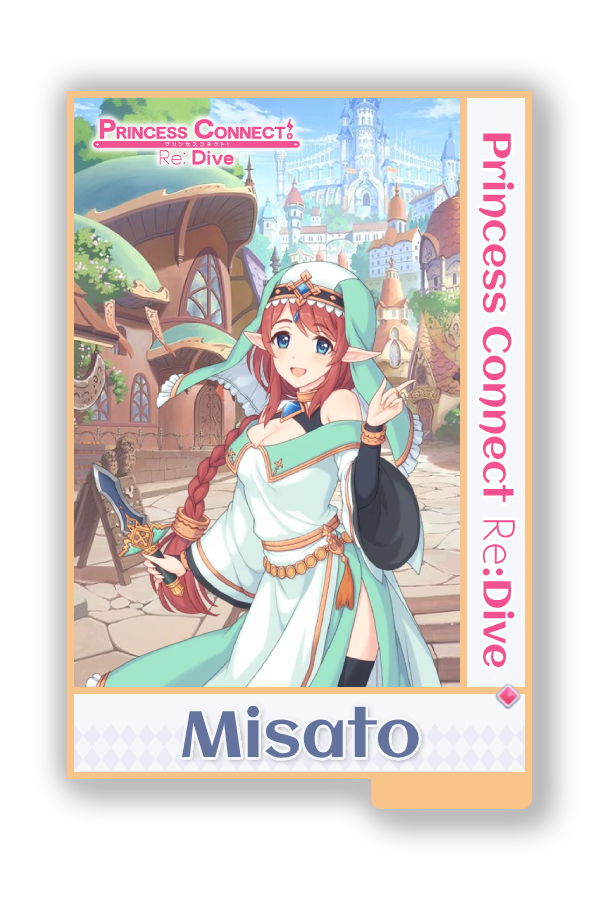
<style>
.page{position:relative;width:600px;height:900px;background:#ffffff}
.page>*{position:absolute;margin:0}
.t1{font:39px "Aclonica-Regular";color:#f55191}
.t2{font:39px "AaarghNormal";color:#f55191}
.t3{font:65px "Aclonica-Regular";color:#64739d}
</style>
<div class="page">
<p class="t1" style="left:478px;top:133px;width:38px;height:534px;rotate:90deg">Princess Connect <span class="t2">Re</span>:Dive</p>
<p class="t3" style="left:181px;top:705px;width:238px;height:53px">Misato</p>
</div>
